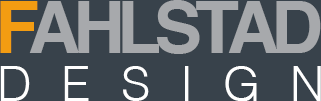
<style>
.page{position:relative;width:321px;height:101px;background:#38424b}
.page>*{position:absolute;margin:0}
.t1{font:72px "Helvetica-Bold";letter-spacing:-0.1em;color:#a7a9ac}
.t2{font:72px "Helvetica-Bold";letter-spacing:-0.1em;color:#f39c12}
.t3{font:48px "Helvetica-Light";letter-spacing:0.62em;color:#ffffff}
</style>
<div class="page">
<p class="t1" style="left:0px;top:0px;width:321px;height:54px"><span class="t2">F</span>AHLSTAD</p>
<p class="t3" style="left:0px;top:66px;width:321px;height:35px">DESIGN</p>
</div>
